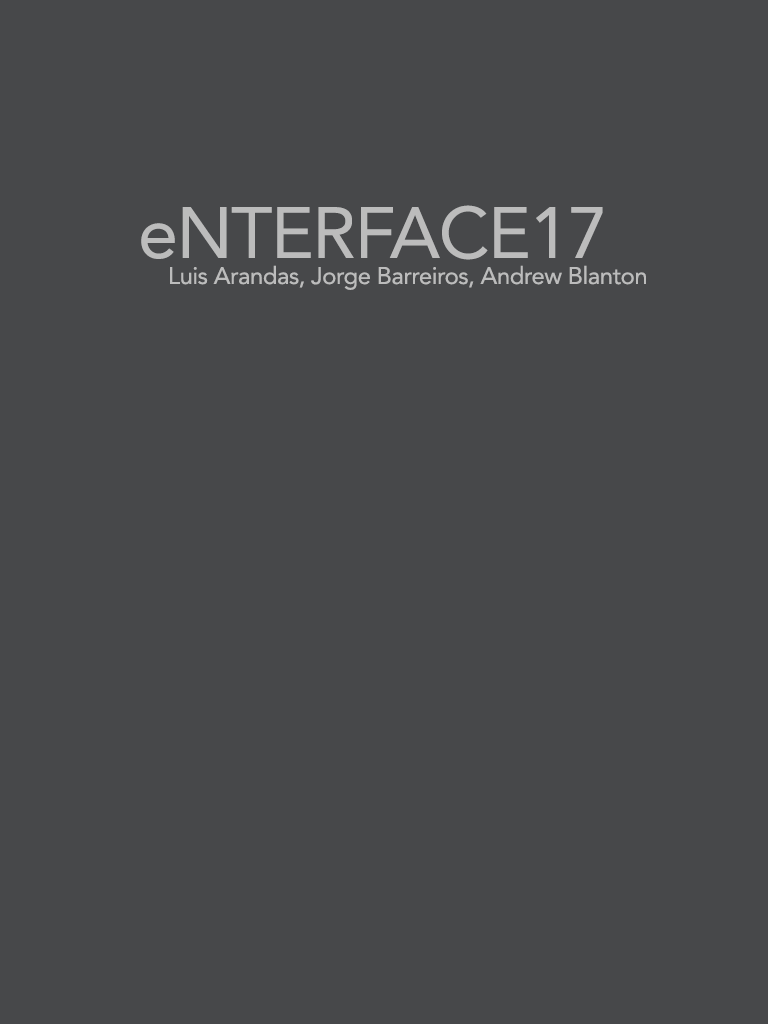
<style>
.page{position:relative;width:768px;height:1024px;background:#47484a}
.page>*{position:absolute;margin:0}
.t1{font:72px "Avenir-Roman";letter-spacing:-0.02em;color:#bcbcbc}
.t2{font:24px "Avenir-Roman";letter-spacing:-0.02em;color:#bcbcbc}
</style>
<div class="page">
<p class="t1" style="left:141px;top:205px;width:462px;height:55px">eNTERFACE17</p>
<p class="t2" style="left:170px;top:265px;width:476px;height:25px">Luis Arandas, Jorge Barreiros, Andrew Blanton</p>
</div>
